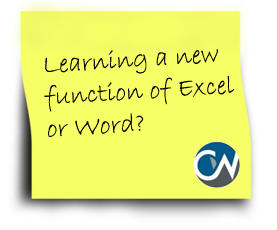
<style>
.page{position:relative;width:277px;height:230px;background:#f6ff66}
.page>*{position:absolute;margin:0}
.t1{font:26.7px/32px "BradleyHandITC";color:#000000}
</style>
<div class="page">
<p class="t1" style="left:44px;top:49px;width:191px;height:89px;rotate:-4deg">Learning a new <br>function of Excel <br>or Word?</p>
</div>
